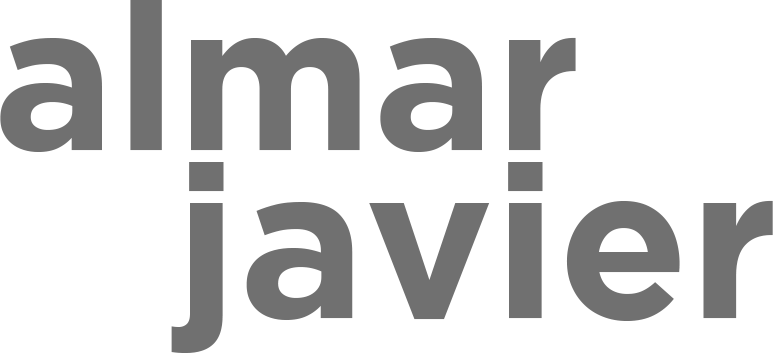
<style>
.page{position:relative;width:773px;height:353px;background:#ffffff}
.page>*{position:absolute;margin:0}
.t1{font:206px "Gotham-Bold";color:#707070}
.t2{font:213.7px "Gotham-Bold";color:#707070}
</style>
<div class="page">
<p class="t1" style="left:0px;top:0px;width:576px;height:152px">almar</p>
<p class="t2" style="left:171px;top:162px;width:602px;height:191px">javier</p>
</div>
